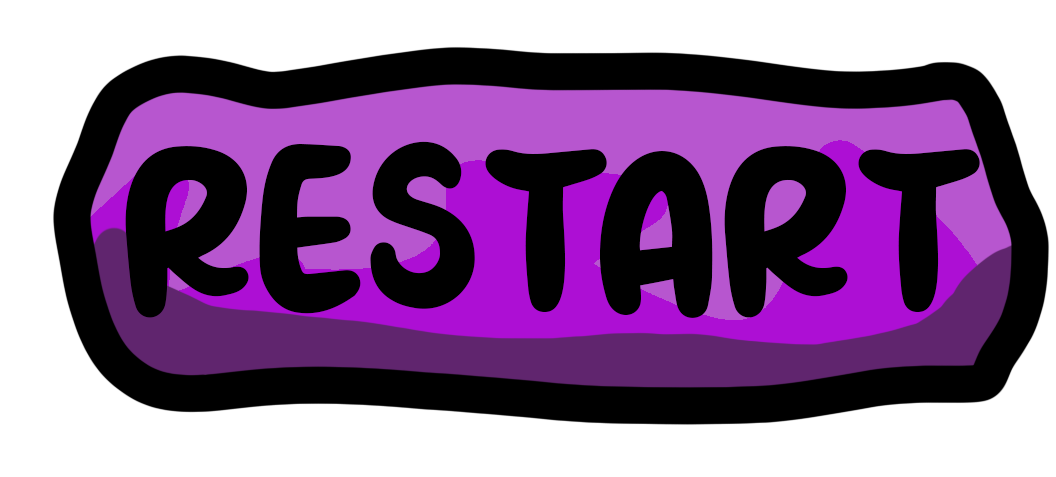
<style>
.page{position:relative;width:1056px;height:477px;background:#ffffff}
.page>*{position:absolute;margin:0}
.t1{font:191.7px "Pineapple-Days";color:#000000}
</style>
<div class="page">
<p class="t1" style="left:125px;top:141px;width:855px;height:177px">RESTART</p>
</div>
